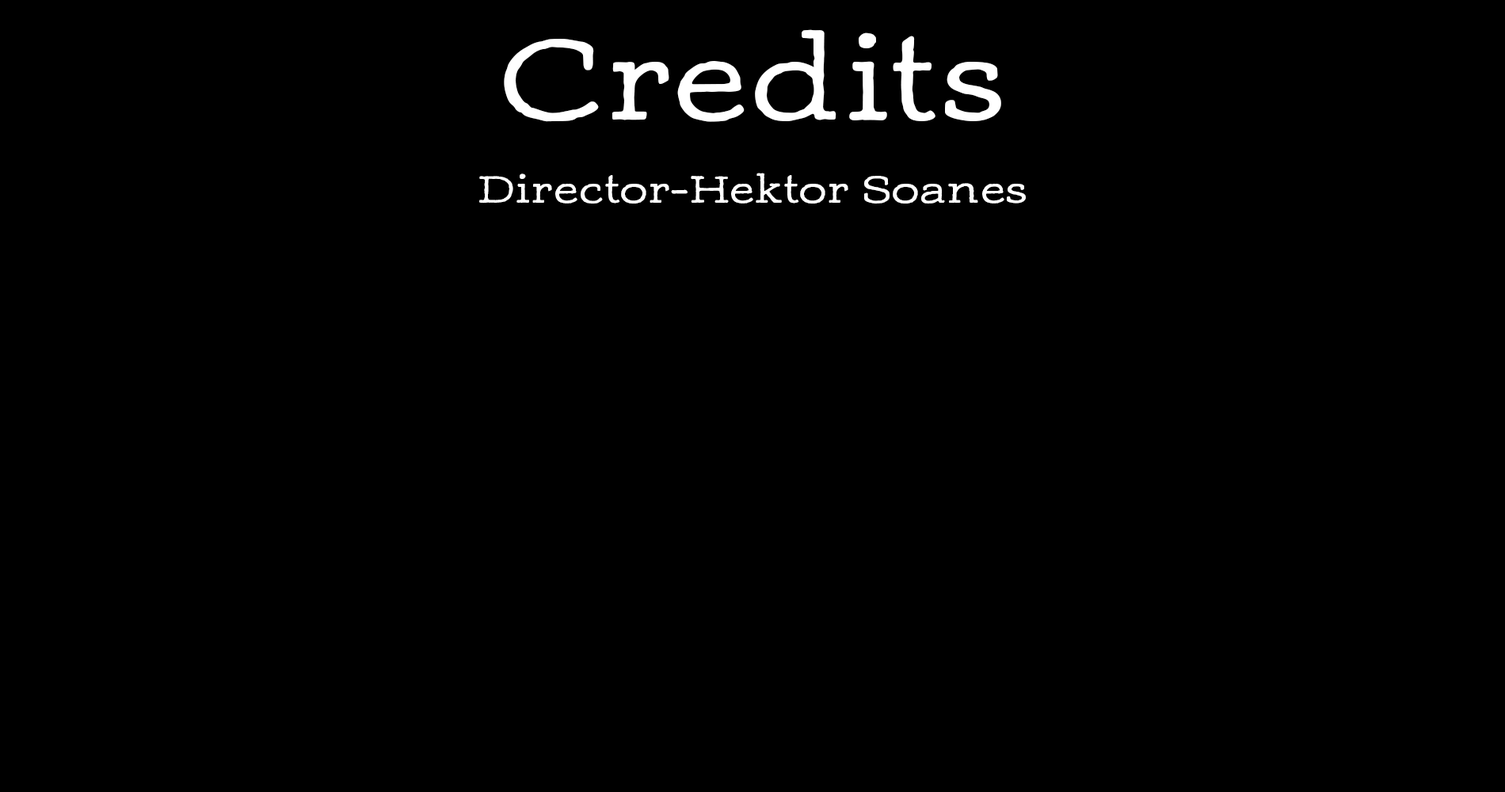
<style>
.page{position:relative;width:1505px;height:792px;background:#000000}
.page>*{position:absolute;margin:0}
.t1{font:118.8px "AdornSlabSerif";color:#ffffff}
.t2{font:39.6px "AdornSlabSerif";color:#ffffff}
</style>
<div class="page">
<p class="t1" style="left:504px;top:29px;width:497px;height:93px">Credits</p>
<p class="t2" style="left:479px;top:173px;width:547px;height:31px">Director-Hektor Soanes</p>
</div>
